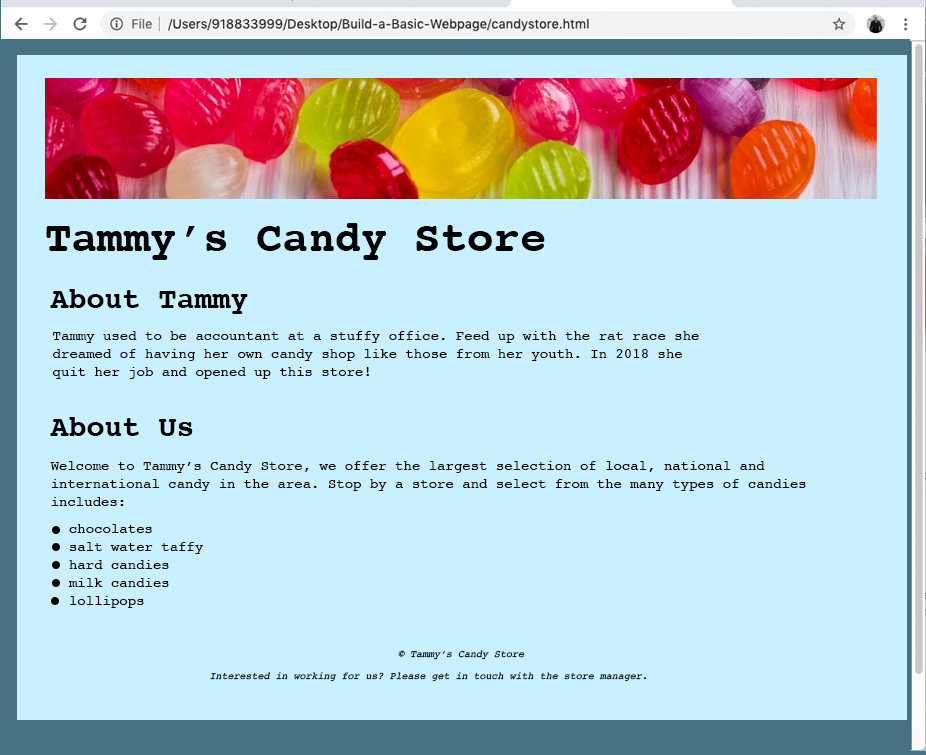
<style>
.page{position:relative;width:926px;height:755px;background:#c8f0ff}
.page>*{position:absolute;margin:0}
.t1{font:44px "Courier-Bold";color:#000000}
.t2{font:30px "Courier-Bold";color:#000000}
.t3{font:14px/18px "Courier";color:#000000}
.t4{font:10px "Courier-Oblique";color:#000000}
.t5{font:10px "Courier-Oblique"}
</style>
<div class="page">
<p class="t1" style="left:46px;top:223px;width:499px;height:37px">Tammy’s Candy Store</p>
<p class="t2" style="left:50px;top:289px;width:198px;height:25px">About Tammy</p>
<p class="t3" style="left:52px;top:331px;width:647px;height:48px">Tammy used to be accountant at a stuffy office. Feed up with the rat race she<br>dreamed of having her own candy shop like those from her youth. In 2018 she <br>quit her job and opened up this store!</p>
<p class="t2" style="left:50px;top:417px;width:143px;height:19px">About Us</p>
<p class="t3" style="left:50px;top:461px;width:756px;height:45px">Welcome to Tammy’s Candy Store, we offer the largest selection of local, national and <br>international candy in the area. Stop by a store and select from the many types of candies <br>includes:</p>
<p class="t3" style="left:68px;top:524px;width:136px;height:84px">chocolates<br>salt water taffy<br>hard candies<br>milk candies<br>lollipops</p>
<p class="t4" style="left:398px;top:650px;width:127px;height:10px">© Tammy’s Candy Store</p>
<p class="t5" style="left:210px;top:672px;width:436px;height:10px">Interested in working for us? Please get in touch with the store manager.</p>
</div>
